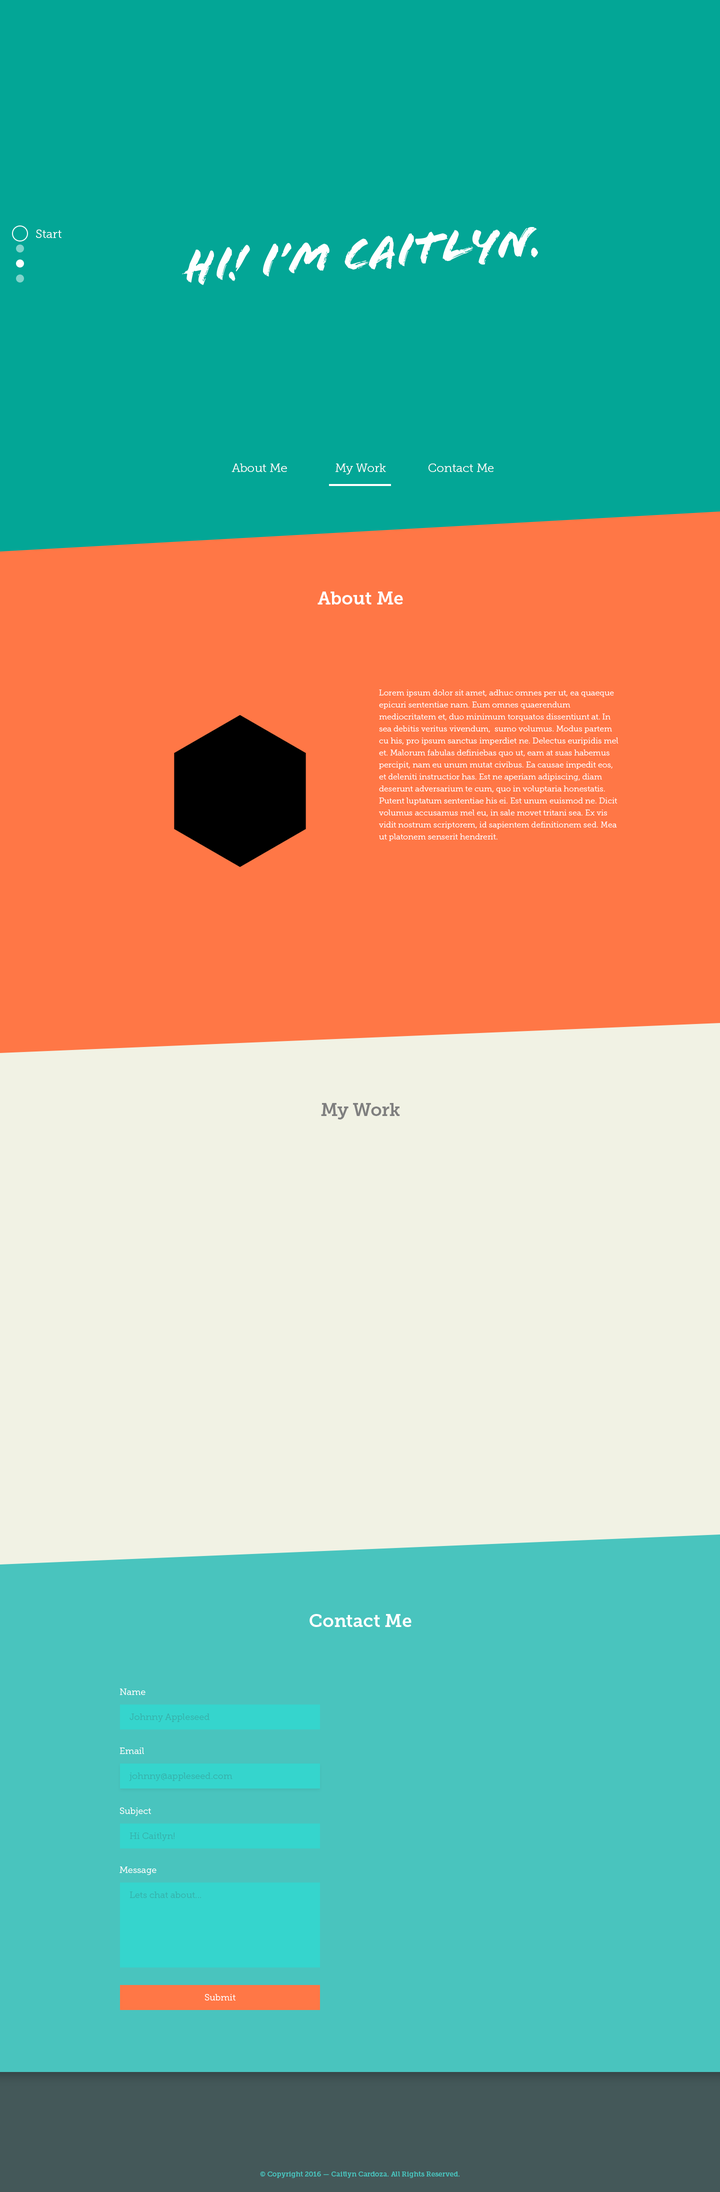
<style>
.page{position:relative;width:720px;height:2192px;background:#03a696}
.page>*{position:absolute;margin:0}
.t1{font:12px "MuseoSlab-300";color:#ffffff}
.t2{font:18px "MuseoSlab-700";color:#ffffff}
.t3{font:8px/12px "MuseoSlab-300";color:#ffffff}
.t4{font:18px "MuseoSlab-700";color:#7f7f7f}
.t5{font:9px "MuseoSlab-300";color:#ffffff}
.t6{font:9px "MuseoSlab-300";color:#36b0aa}
.t7{font:7px "MuseoSlab-700";color:#49c4be}
</style>
<div class="page">
<p class="t1" style="left:36px;top:230px;width:26px;height:8px">Start</p>
<p class="t1" style="left:232px;top:464px;width:55px;height:8px">About Me</p>
<p class="t1" style="left:336px;top:464px;width:50px;height:10px">My Work</p>
<p class="t1" style="left:428px;top:464px;width:66px;height:8px">Contact Me</p>
<p class="t2" style="left:318px;top:592px;width:85px;height:12px">About Me</p>
<p class="t3" style="left:379px;top:690px;width:239px;height:151px">Lorem ipsum dolor sit amet, adhuc omnes per ut, ea quaeque epicuri sententiae nam. Eum omnes quaerendum mediocritatem et, duo minimum torquatos dissentiunt at. In sea debitis veritus vivendum,  sumo volumus. Modus partem cu his, pro ipsum sanctus imperdiet ne. Delectus euripidis mel et. Malorum fabulas definiebas quo ut, eam at suas habemus percipit, nam eu unum mutat civibus. Ea causae impedit eos, et deleniti instructior has. Est ne aperiam adipiscing, diam deserunt adversarium te cum, quo in voluptaria honestatis. Putent luptatum sententiae his ei. Est unum euismod ne. Dicit volumus accusamus mel eu, in sale movet tritani sea. Ex vis vidit nostrum scriptorem, id sapientem definitionem sed. Mea ut platonem senserit hendrerit.</p>
<p class="t4" style="left:321px;top:1103px;width:79px;height:17px">My Work</p>
<p class="t2" style="left:310px;top:1614px;width:102px;height:13px">Contact Me</p>
<p class="t5" style="left:120px;top:1688px;width:26px;height:7px">Name</p>
<p class="t6" style="left:130px;top:1714px;width:80px;height:8px">Johnny Appleseed</p>
<p class="t5" style="left:120px;top:1748px;width:24px;height:6px">Email</p>
<p class="t6" style="left:129px;top:1772px;width:103px;height:9px">johnny@appleseed.com</p>
<p class="t5" style="left:120px;top:1808px;width:31px;height:8px">Subject</p>
<p class="t6" style="left:130px;top:1832px;width:44px;height:9px">Hi Caitlyn!</p>
<p class="t5" style="left:120px;top:1866px;width:36px;height:9px">Message</p>
<p class="t6" style="left:130px;top:1892px;width:71px;height:6px">Lets chat about...</p>
<p class="t5" style="left:205px;top:1994px;width:31px;height:6px">Submit</p>
<p class="t7" style="left:260px;top:2172px;width:200px;height:6px">© Copyright 2016 — Caitlyn Cardoza. All Rights Reserved.</p>
</div>
